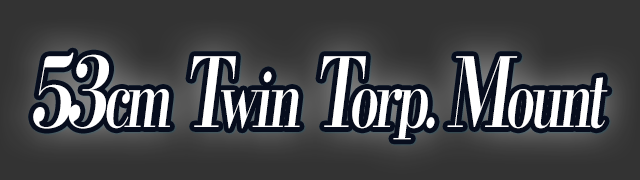
<style>
.page{position:relative;width:640px;height:180px;background:#333333}
.page>*{position:absolute;margin:0}
.t1{font:76.8px "KochoStd-Heavy";letter-spacing:-0.08em;color:#ffffff;font-style:italic;scale:0.7 1}
.t2{font:96px "KochoStd-Heavy";letter-spacing:-0.08em;color:#ffffff;font-style:italic;scale:0.7 1}
</style>
<div class="page">
<p class="t1" style="left:33px;top:52px;width:575px;height:88px"><span class="t2">53</span>cm<span class="t2"> T</span>win<span class="t2"> T</span>orp. <span class="t2">M</span>ount</p>
</div>
